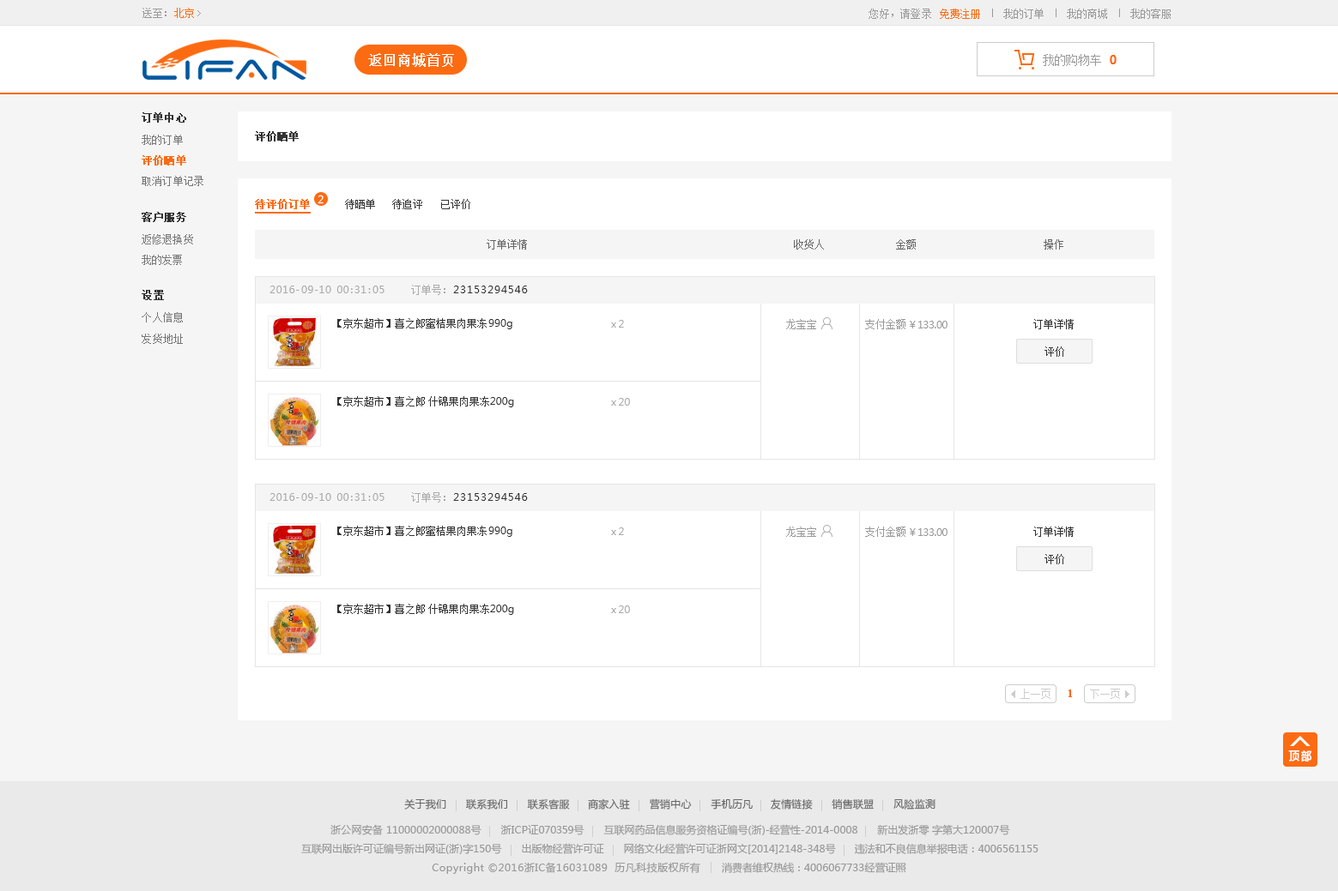
<style>
.page{position:relative;width:1338px;height:891px;background:#ffffff}
.page>*{position:absolute;margin:0}
.t1{font:10.1px "SimSun";letter-spacing:0.02em;color:#999999}
.t2{font:10.1px "SimSun";letter-spacing:0.02em;color:#fc6b12}
.t3{font:10.6px "SimSun";letter-spacing:0.02em;color:#999999}
.t4{font:10.6px "SimSun";letter-spacing:0.02em;color:#fc6b12}
.t5{font:13.7px "SimSun";color:#ffffff;font-weight:bold}
.t6{font:12px "SimSun";letter-spacing:-0.06em;color:#999999}
.t7{font:12px "MicrosoftYaHei-Bold";letter-spacing:-0.06em;color:#fc6b12}
.t8{font:10.3px "SimSun";color:#333333;font-weight:bold}
.t9{font:10.3px "SimSun";color:#777777}
.t10{font:10.3px "SimSun";color:#fc6b12;font-weight:bold}
.t11{font:10.3px "MicrosoftYaHei";color:#ffffff}
.t12{font:10.3px "SimSun";color:#333333}
.t13{font:10.4px "SimSun";color:#333333;font-weight:bold}
.t14{font:10.4px "SimSun";color:#777777}
.t15{font:10.3px "SimSun";color:#666666}
.t16{font:10.3px "MicrosoftYaHei";letter-spacing:0.04em;color:#aaaaaa}
.t17{font:10.3px "SimSun";color:#aaaaaa}
.t18{font:10.3px "MicrosoftYaHei";letter-spacing:0.08em;color:#333333}
.t19{font:10.3px "MicrosoftYaHei";color:#333333}
.t20{font:10.3px "MicrosoftYaHei";color:#aaaaaa}
.t21{font:10.3px "SimSun";color:#999999}
.t22{font:10.3px "MicrosoftYaHei";letter-spacing:-0.04em;color:#999999}
.t23{font:10.3px "SimSun";color:#cccccc}
.t24{font:11.1px "SimSun";color:#ff6600;font-weight:bold}
.t25{font:11.3px "MicrosoftYaHei";color:#ffffff;font-weight:bold;scale:0.91 1}
.t26{font:10.3px "MicrosoftYaHei";letter-spacing:0.02em;color:#666666}
.t27{font:10.3px "MicrosoftYaHei";color:#999999}
.t28{font:10.3px "MicrosoftYaHei";letter-spacing:0.02em;color:#999999}
.t29{font:10.3px "MicrosoftYaHei";letter-spacing:-0.02em;color:#999999}
.t30{font:10.3px "MicrosoftYaHei";letter-spacing:0.04em;color:#999999}
</style>
<div class="page">
<p class="t1" style="left:142px;top:8px;width:52px;height:10px">送至：<span class="t2">北京</span></p>
<p class="t3" style="left:868px;top:9px;width:63px;height:10px">您好，请登录</p>
<p class="t4" style="left:940px;top:9px;width:40px;height:10px">免费注册</p>
<p class="t3" style="left:1003px;top:9px;width:40px;height:10px">我的订单</p>
<p class="t3" style="left:1066px;top:9px;width:41px;height:10px">我的商城</p>
<p class="t3" style="left:1130px;top:9px;width:40px;height:10px">我的客服</p>
<p class="t5" style="left:368px;top:53px;width:86px;height:14px">返回商城首页</p>
<p class="t6" style="left:1042px;top:54px;width:59px;height:12px">我的购物车</p>
<p class="t7" style="left:1109px;top:55px;width:7px;height:9px">0</p>
<p class="t8" style="left:142px;top:112px;width:44px;height:11px">订单中心</p>
<p class="t9" style="left:142px;top:135px;width:41px;height:10px">我的订单</p>
<p class="t8" style="left:255px;top:131px;width:44px;height:11px">评价晒单</p>
<p class="t10" style="left:142px;top:155px;width:44px;height:11px">评价晒单</p>
<p class="t9" style="left:142px;top:176px;width:61px;height:10px">取消订单记录</p>
<p class="t11" style="left:317px;top:195px;width:6px;height:9px">2</p>
<p class="t10" style="left:255px;top:199px;width:55px;height:10px">待评价订单</p>
<p class="t12" style="left:345px;top:199px;width:30px;height:10px">待晒单</p>
<p class="t12" style="left:392px;top:199px;width:30px;height:10px">待追评</p>
<p class="t12" style="left:441px;top:199px;width:29px;height:10px">已评价</p>
<p class="t13" style="left:142px;top:212px;width:44px;height:10px">客户服务</p>
<p class="t14" style="left:142px;top:234px;width:51px;height:11px">返修退换货</p>
<p class="t15" style="left:486px;top:239px;width:41px;height:11px">订单详情</p>
<p class="t15" style="left:794px;top:239px;width:30px;height:11px">收货人</p>
<p class="t15" style="left:896px;top:239px;width:19px;height:11px">金额</p>
<p class="t15" style="left:1043px;top:239px;width:20px;height:11px">操作</p>
<p class="t14" style="left:142px;top:255px;width:40px;height:10px">我的发票</p>
<p class="t13" style="left:142px;top:290px;width:22px;height:10px">设置</p>
<p class="t16" style="left:269px;top:286px;width:115px;height:7px">2016-09-10 00:31:05</p>
<p class="t17" style="left:411px;top:285px;width:34px;height:10px">订单号：</p>
<p class="t18" style="left:453px;top:286px;width:75px;height:7px">23153294546</p>
<p class="t14" style="left:142px;top:312px;width:41px;height:11px">个人信息</p>
<p class="t12" style="left:337px;top:318px;width:175px;height:11px">【京东超市】喜之郎蜜桔果肉果冻<span class="t19">990g</span></p>
<p class="t20" style="left:611px;top:320px;width:13px;height:8px">x 2</p>
<p class="t21" style="left:786px;top:319px;width:30px;height:10px">龙宝宝</p>
<p class="t21" style="left:865px;top:319px;width:40px;height:10px">支付金额</p>
<p class="t22" style="left:909px;top:321px;width:38px;height:8px">￥133.00</p>
<p class="t12" style="left:1033px;top:319px;width:40px;height:10px">订单详情</p>
<p class="t14" style="left:142px;top:334px;width:41px;height:10px">发货地址</p>
<p class="t12" style="left:1044px;top:347px;width:20px;height:10px">评价</p>
<p class="t12" style="left:337px;top:396px;width:177px;height:12px">【京东超市】喜之郎 什锦果肉果冻<span class="t19">200g</span></p>
<p class="t20" style="left:611px;top:398px;width:19px;height:8px">x 20</p>
<p class="t16" style="left:269px;top:493px;width:115px;height:8px">2016-09-10 00:31:05</p>
<p class="t17" style="left:411px;top:492px;width:34px;height:11px">订单号：</p>
<p class="t18" style="left:453px;top:493px;width:75px;height:8px">23153294546</p>
<p class="t12" style="left:337px;top:526px;width:175px;height:11px">【京东超市】喜之郎蜜桔果肉果冻<span class="t19">990g</span></p>
<p class="t20" style="left:611px;top:528px;width:13px;height:7px">x 2</p>
<p class="t21" style="left:786px;top:527px;width:30px;height:10px">龙宝宝</p>
<p class="t21" style="left:865px;top:527px;width:40px;height:10px">支付金额</p>
<p class="t22" style="left:909px;top:529px;width:38px;height:7px">￥133.00</p>
<p class="t12" style="left:1033px;top:527px;width:40px;height:10px">订单详情</p>
<p class="t12" style="left:1044px;top:554px;width:20px;height:11px">评价</p>
<p class="t12" style="left:337px;top:604px;width:177px;height:11px">【京东超市】喜之郎 什锦果肉果冻<span class="t19">200g</span></p>
<p class="t20" style="left:611px;top:606px;width:19px;height:7px">x 20</p>
<p class="t23" style="left:1020px;top:689px;width:30px;height:10px">上一页</p>
<p class="t24" style="left:1068px;top:690px;width:4px;height:8px">1</p>
<p class="t23" style="left:1090px;top:689px;width:30px;height:10px">下一页</p>
<p class="t25" style="left:1288px;top:751px;width:24px;height:12px">顶 部</p>
<p class="t26" style="left:404px;top:799px;width:531px;height:11px">关于我们      联系我们      联系客服     商家入驻      营销中心      手机历凡     友情链接      销售联盟      风险监测</p>
<p class="t27" style="left:330px;top:825px;width:680px;height:11px"><span class="t28">浙公网安备 </span>11000002000088<span class="t28">号      浙ICP证</span><span class="t29">070359号     </span>互联网药品信息服务资格证编号(<span class="t28">浙</span>)-经营性-2014-0008      新出发<span class="t28">浙</span>零 字第大120007号</p>
<p class="t27" style="left:301px;top:843px;width:737px;height:12px">互联网出版许可证编号新出网证(<span class="t28">浙</span>)字150号       出版物经营许可证       网络文化经营许可证<span class="t28">浙</span>网文[2014]2148-348号       违法和不良信息举报电话：4006561155</p>
<p class="t30" style="left:432px;top:862px;width:474px;height:12px"><span class="t27"><br><br></span>Copyright ©2016浙IC备16031089  历凡科技版权所有<span class="t27">       消费者维权热线：4006067733经营证照</span></p>
</div>
